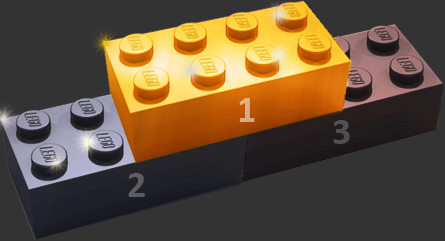
<style>
.page{position:relative;width:445px;height:241px;background:#333333}
.page>*{position:absolute;margin:0}
.t1{font:37.7px "Calibri-Bold";color:#dcaa83}
.t2{font:37.6px "Calibri-Bold";color:#524d4f}
.t3{font:37.6px "Calibri-Bold";color:#5c5c61}
</style>
<div class="page">
<p class="t1" style="left:239px;top:98px;width:16px;height:24px">1</p>
<p class="t2" style="left:333px;top:120px;width:17px;height:24px">3</p>
<p class="t3" style="left:128px;top:173px;width:17px;height:24px">2</p>
</div>
